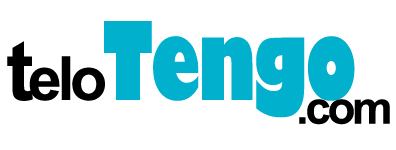
<style>
.page{position:relative;width:396px;height:150px;background:#ffffff}
.page>*{position:absolute;margin:0}
.t1{font:105.8px "GillSans-UltraBoldCondensed";letter-spacing:-0.025em;color:#00b0cc}
.t2{font:116.4px "Utsaah-Bold";letter-spacing:-0.05em;color:#000000}
.t3{font:84.7px "Utsaah-Bold";letter-spacing:-0.05em;color:#000000}
.t4{font:63.5px "Utsaah-Bold";letter-spacing:-0.05em;color:#000000}
</style>
<div class="page">
<p class="t1" style="left:7px;top:21px;width:348px;height:97px"><span class="t2">t</span><span class="t3">elo</span>Tengo</p>
<p class="t4" style="left:299px;top:99px;width:91px;height:26px">.com</p>
</div>
